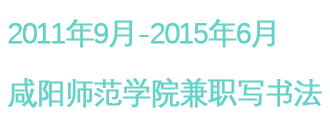
<style>
.page{position:relative;width:330px;height:125px;background:#ffffff}
.page>*{position:absolute;margin:0}
.t1{font:30px/60px "DengXian-Regular";letter-spacing:-0.075em;color:#64d2c9;text-transform:uppercase;font-weight:bold}
</style>
<div class="page">
<p class="t1" style="left:7px;top:19px;width:315px;height:89px">2011年9月-2015年6月<br>咸阳师范学院兼职写书法</p>
</div>
